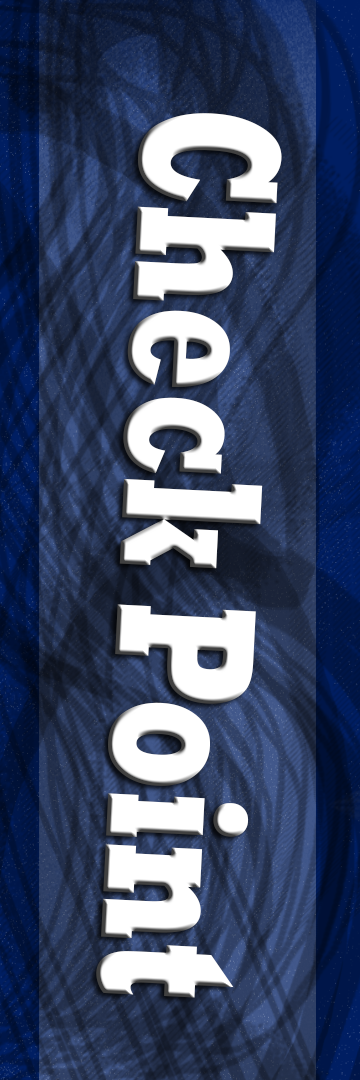
<style>
.page{position:relative;width:360px;height:1080px}
.page>*{position:absolute;margin:0}
.t1{font:203.3px "Rockwell-ExtraBold";color:#ffffff;scale:0.62 1}
</style>
<div class="page">
<p class="t1" style="left:96px;top:113px;width:186px;height:885px;rotate:93deg">Check Point</p>
</div>
